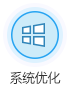
<style>
.page{position:relative;width:70px;height:94px;background:#ffffff}
.page>*{position:absolute;margin:0}
.t1{font:13px "MicrosoftYaHei";color:#323232}
</style>
<div class="page">
<p class="t1" style="left:10px;top:71px;width:51px;height:13px">系统优化</p>
</div>
